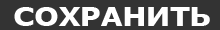
<style>
.page{position:relative;width:220px;height:30px;background:#333333}
.page>*{position:absolute;margin:0}
.t1{font:25.8px "Tahoma-Bold";color:#ffffff;scale:1.22 1}
</style>
<div class="page">
<p class="t1" style="left:14px;top:7px;width:196px;height:19px">СОХРАНИТЬ</p>
</div>
